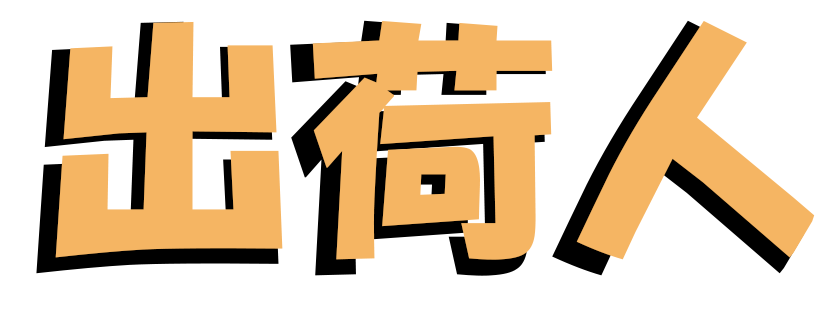
<style>
.page{position:relative;width:833px;height:318px;background:#ffffff}
.page>*{position:absolute;margin:0}
.t1{font:266.7px "HGPSoeiKakupoptai";letter-spacing:-0.025em}
.t2{font:250px "HGPSoeiKakupoptai";letter-spacing:0.05em;color:#f5b563}
</style>
<div class="page">
<p class="t1" style="left:36px;top:20px;width:770px;height:256px">出荷人</p>
<p class="t2" style="left:55px;top:21px;width:760px;height:239px">出荷人</p>
</div>
